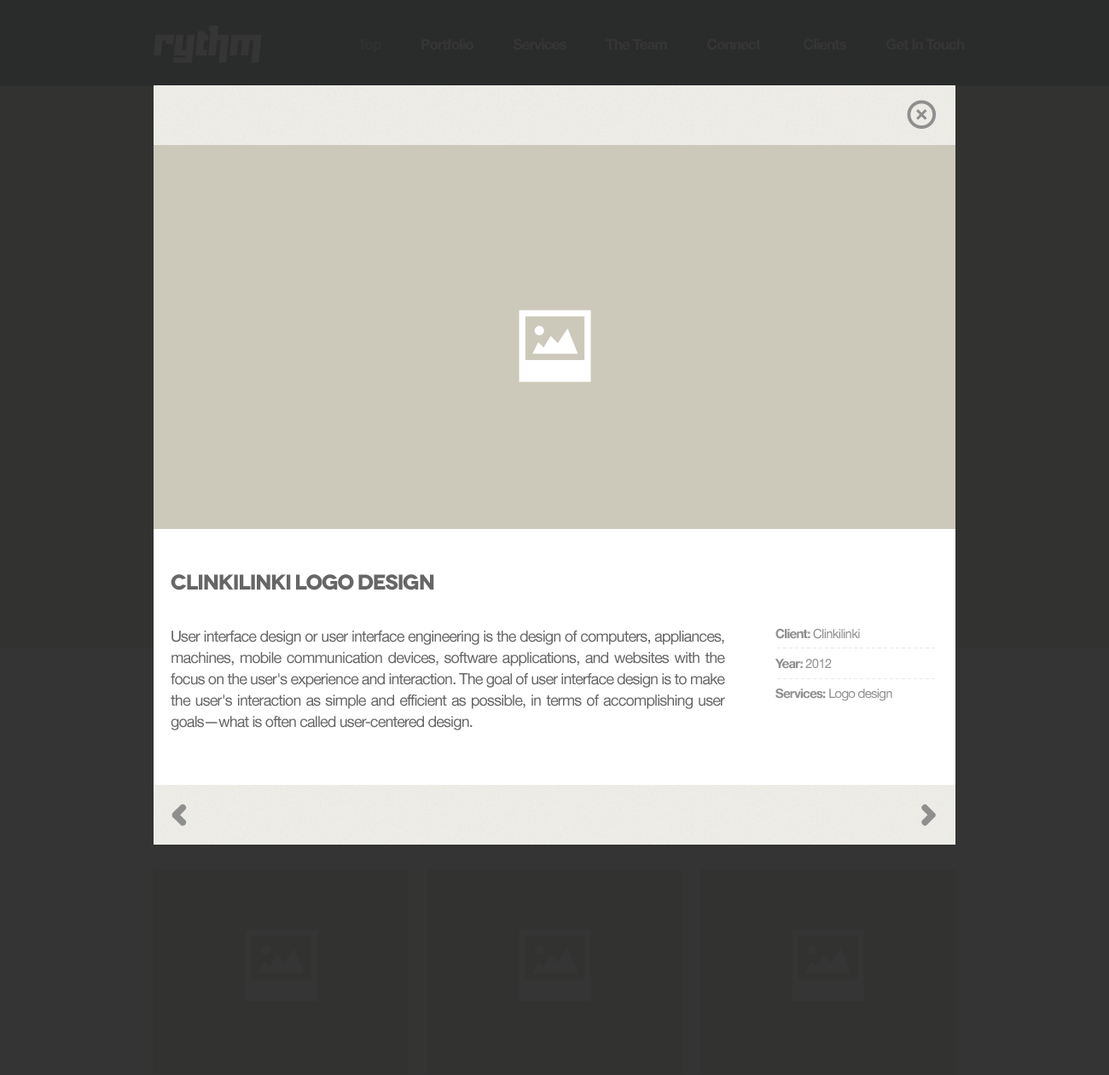
<style>
.page{position:relative;width:1109px;height:1075px;background:#323231}
.page>*{position:absolute;margin:0}
.t1{font:21.3px "Novecentowide-Bold";letter-spacing:-0.06em;color:#666666}
.t2{font:12.8px/29.9px "HelveticaNeue";letter-spacing:-0.05em;color:#8f8f8f}
.t3{font:12.8px/29.9px "HelveticaNeue-Bold";letter-spacing:-0.05em;color:#8f8f8f}
.t4{font:15.4px/21.3px "HelveticaNeue";letter-spacing:-0.05em;color:#666666}
</style>
<div class="page">
<p class="t1" style="left:171px;top:574px;width:263px;height:16px">clinkilinki logo design</p>
<p class="t2" style="left:775px;top:629px;width:117px;height:72px"><span class="t3">Client: </span>Clinkilinki<br><span class="t3">Year: </span>2012<br><span class="t3">Services: </span>Logo design</p>
<p class="t4" style="left:171px;top:631px;width:554px;height:99px;text-align:justify">User interface design or user interface engineering is the design of computers, appliances, machines, mobile communication devices, software applications, and websites with the focus on the user's experience and interaction. The goal of user interface design is to make the user's interaction as simple and efficient as possible, in terms of accomplishing user goals—what is often called user-centered design.</p>
</div>
